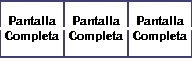
<style>
.page{position:relative;width:192px;height:64px;background:#ffffff}
.page>*{position:absolute;margin:0}
.t1{font:12.5px "BritannicBold";color:#000000}
</style>
<div class="page">
<p class="t1" style="left:5px;top:16px;width:54px;height:26px;text-align:center">Pantalla<br>Completa</p>
<p class="t1" style="left:69px;top:16px;width:54px;height:26px;text-align:center">Pantalla<br>Completa</p>
<p class="t1" style="left:133px;top:16px;width:54px;height:26px;text-align:center">Pantalla<br>Completa</p>
</div>
